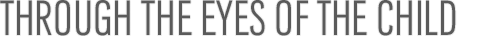
<style>
.page{position:relative;width:478px;height:36px;background:#ffffff}
.page>*{position:absolute;margin:0}
.t1{font:51.8px "URWGroteskT-LigCon";color:#5a5a5a}
</style>
<div class="page">
<p class="t1" style="left:0px;top:0px;width:456px;height:36px">THROUGH THE EYES OF THE CHILD</p>
</div>
